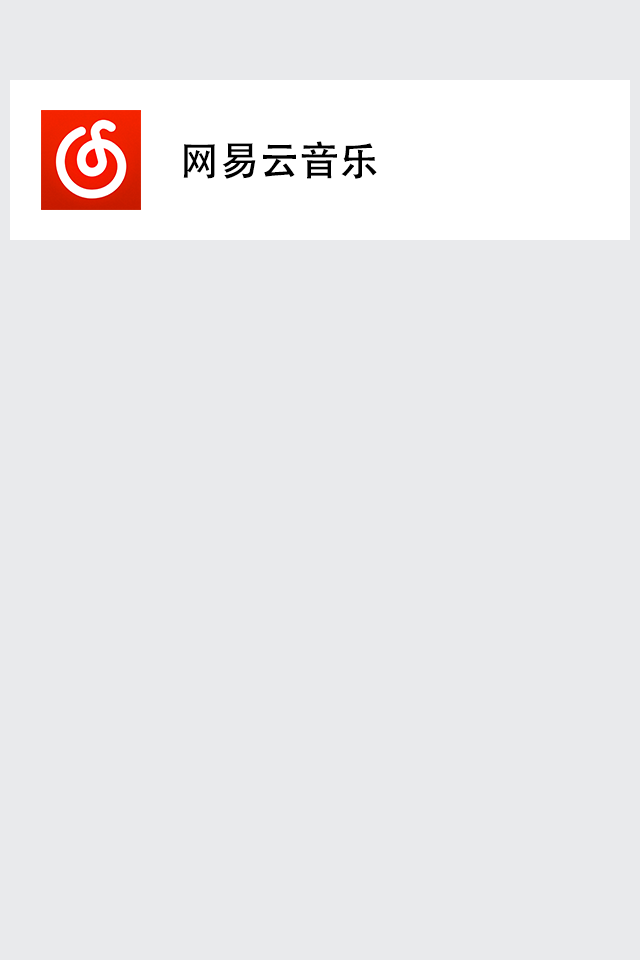
<style>
.page{position:relative;width:640px;height:960px;background:#e9eaec}
.page>*{position:absolute;margin:0}
.t1{font:40px "AdobeHeitiStd-Regular";color:#000000}
</style>
<div class="page">
<p class="t1" style="left:183px;top:141px;width:194px;height:38px">网易云音乐</p>
</div>
